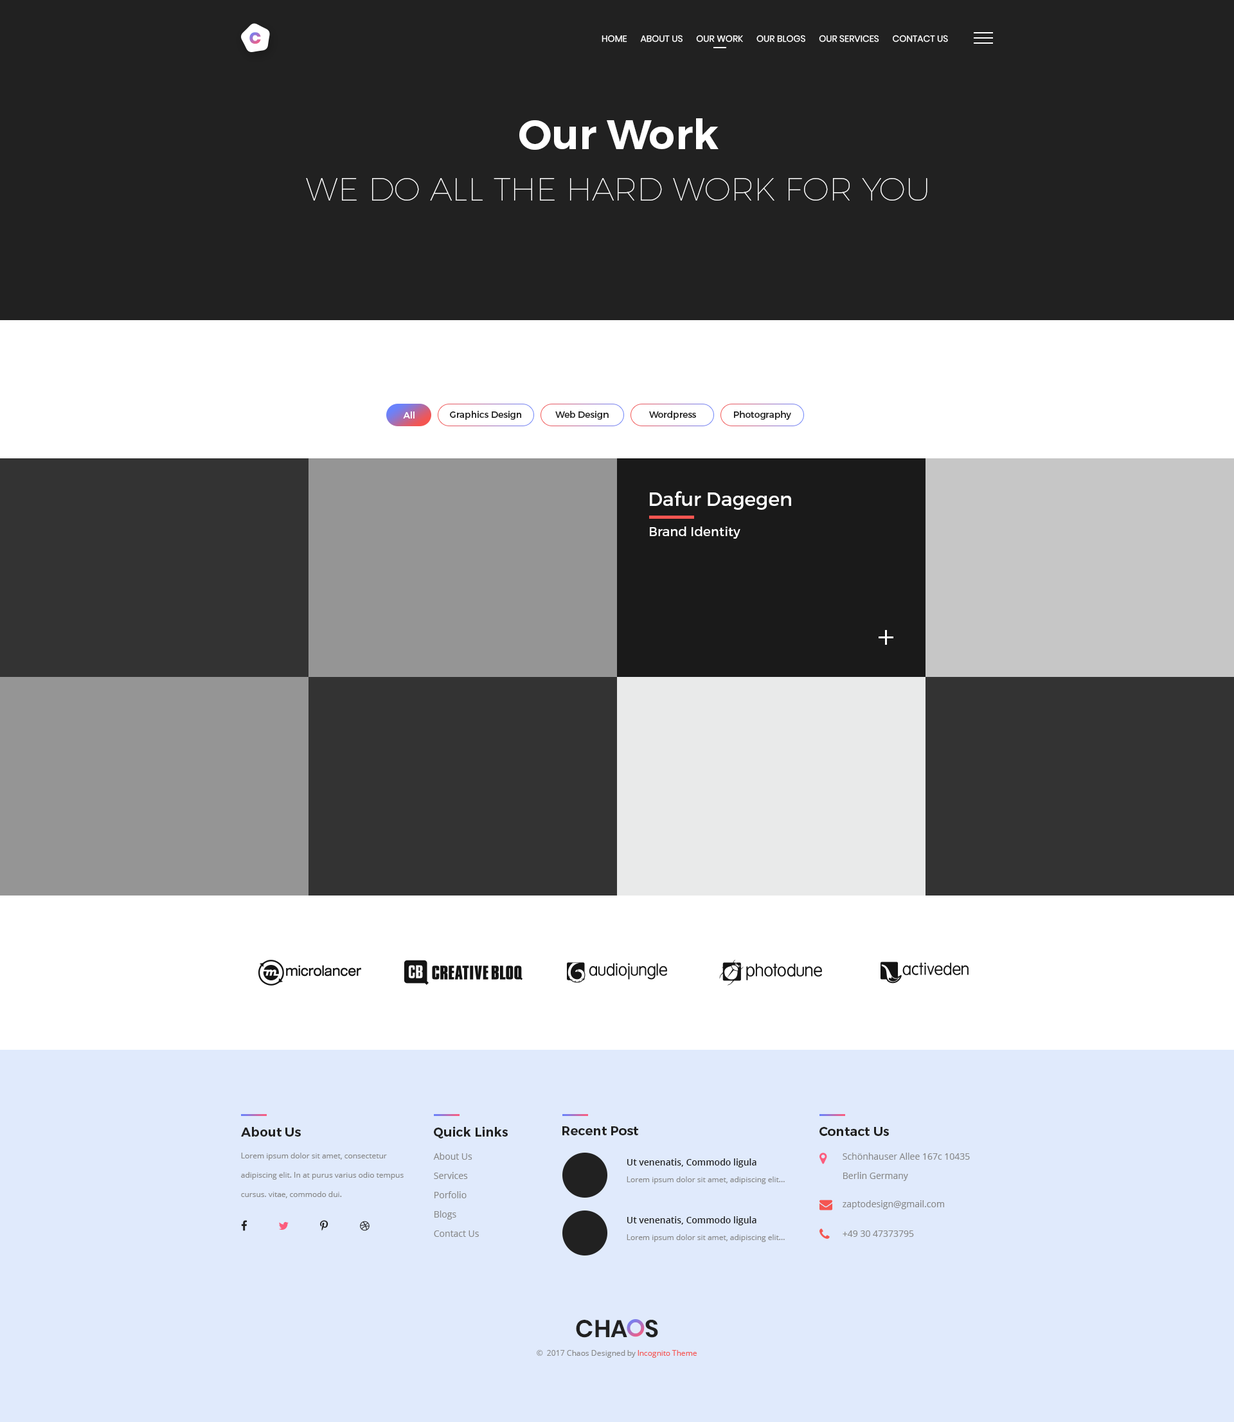
<style>
.page{position:relative;width:1234px;height:1422px;background:#e0eafc}
.page>*{position:absolute;margin:0}
.t1{font:16.1px "Poppins-ExtraBold";text-transform:uppercase}
.t2{font:9px "Poppins-Regular";color:#ffffff;text-transform:uppercase}
.t3{font:32.1px/51.4px "Montserrat-Hairline";color:#ffffff;text-transform:uppercase}
.t4{font:41.8px/51.4px "Montserrat-SemiBold";color:#ffffff}
.t5{font:9px "Montserrat-Regular";color:#ffffff}
.t6{font:9px "Montserrat-Regular";color:#212121}
.t7{font:19.3px "Montserrat-Regular";color:#ffffff}
.t8{font:12.9px "Montserrat-Regular";color:#ffffff}
.t9{font:12.9px "Montserrat-SemiBold";color:#212121}
.t10{font:7.7px/19.3px "OpenSans";color:#888888}
.t11{font:9px/19.3px "OpenSans";color:#888888}
.t12{font:9px "OpenSans-Semibold";color:#212121}
.t13{font:7.7px "OpenSans";color:#888888}
.t14{font:9px "OpenSans";color:#888888}
.t15{font:24.3px "Poppins-SemiBold";color:#212121;text-transform:uppercase}
.t16{font:7.7px "OpenSans";color:#f45551}
</style>
<div class="page">
<p class="t1" style="left:249px;top:32px;width:12px;height:12px">C</p>
<p class="t2" style="left:602px;top:35px;width:346px;height:7px">HOME      ABOUT US      Our Work      OUR BLOGS      Our SERVICES      CONTACT US</p>
<p class="t3" style="left:306px;top:118px;width:622px;height:83px;text-align:center"><span class="t4">Our Work<br></span>We do all the hard work for you</p>
<p class="t5" style="left:403px;top:411px;width:12px;height:8px">All</p>
<p class="t6" style="left:450px;top:411px;width:71px;height:9px">Graphics Design</p>
<p class="t6" style="left:555px;top:411px;width:54px;height:9px">Web Design</p>
<p class="t6" style="left:649px;top:411px;width:47px;height:9px">Wordpress</p>
<p class="t6" style="left:734px;top:411px;width:57px;height:9px">Photography</p>
<p class="t7" style="left:650px;top:491px;width:141px;height:19px">Dafur Dagegen</p>
<p class="t8" style="left:650px;top:526px;width:91px;height:13px">Brand Identity</p>
<p class="t9" style="left:241px;top:1127px;width:60px;height:10px">About Us</p>
<p class="t9" style="left:434px;top:1126px;width:74px;height:12px">Quick Links</p>
<p class="t9" style="left:562px;top:1126px;width:76px;height:9px">Recent Post</p>
<p class="t9" style="left:820px;top:1127px;width:69px;height:9px">Contact Us</p>
<p class="t10" style="left:241px;top:1153px;width:163px;height:45px">Lorem ipsum dolor sit amet, consectetur adipiscing elit. In at purus varius odio tempus cursus. vitae, commodo dui.</p>
<p class="t11" style="left:433px;top:1153px;width:46px;height:84px">About Us<br>Services<br>Porfolio<br>Blogs<br>Contact Us</p>
<p class="t11" style="left:843px;top:1153px;width:127px;height:28px">Schönhauser Allee 167c 10435 <br>Berlin Germany</p>
<p class="t12" style="left:627px;top:1158px;width:130px;height:9px">Ut venenatis, Commodo ligula</p>
<p class="t13" style="left:627px;top:1176px;width:158px;height:8px">Lorem ipsum dolor sit amet, adipiscing elit...</p>
<p class="t14" style="left:843px;top:1200px;width:101px;height:9px">zaptodesign@gmail.com</p>
<p class="t12" style="left:627px;top:1216px;width:130px;height:9px">Ut venenatis, Commodo ligula</p>
<p class="t13" style="left:627px;top:1234px;width:158px;height:8px">Lorem ipsum dolor sit amet, adipiscing elit...</p>
<p class="t14" style="left:843px;top:1230px;width:71px;height:7px">+49 30 47373795</p>
<p class="t15" style="left:576px;top:1320px;width:82px;height:18px">Cha s</p>
<p class="t13" style="left:537px;top:1350px;width:160px;height:8px">©  2017 Chaos Designed by <span class="t16">Incognito Theme</span></p>
</div>
